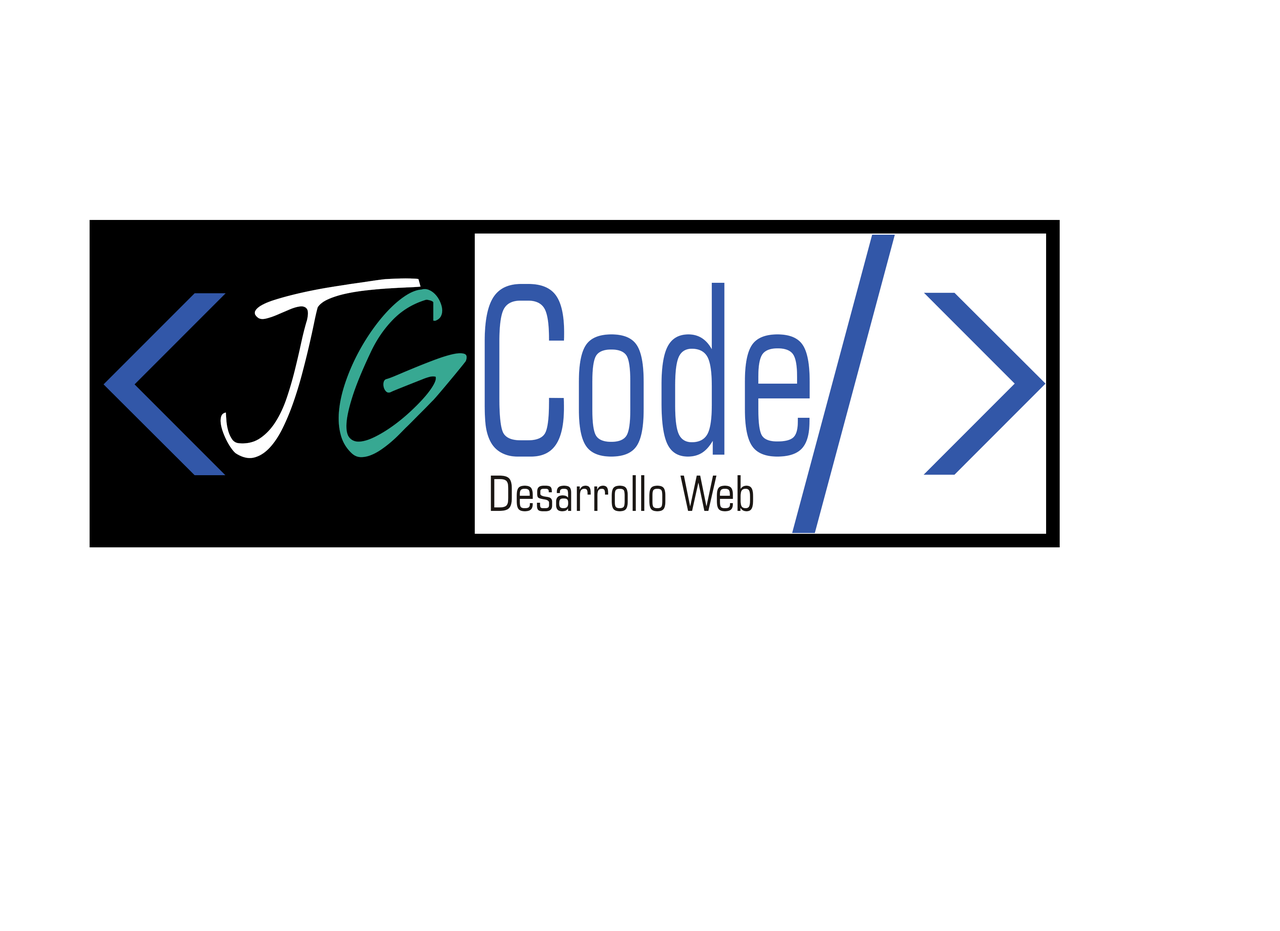
<style>
.page{position:relative;width:1280px;height:931px;background:#ffffff}
.page>*{position:absolute;margin:0}
.t1{font:291px "FashionFetish";color:#3257a8}
.t2{font:232.8px "NothingYouCouldDo";color:#ffffff;scale:0.83 1}
.t3{font:232.8px "NothingYouCouldDo";color:#37a892;scale:0.83 1}
.t4{font:232.8px "Square721BT-RomanCondensed";color:#3257a8;scale:0.83 1}
.t5{font:48.5px "Square721BT-RomanCondensed";color:#1b1714}
</style>
<div class="page">
<p class="t1" style="left:792px;top:235px;width:254px;height:298px">/&gt;</p>
<p class="t2" style="left:220px;top:278px;width:247px;height:180px">J<span class="t3">G</span></p>
<p class="t1" style="left:104px;top:293px;width:122px;height:182px">&lt;</p>
<p class="t4" style="left:485px;top:283px;width:325px;height:174px">Code</p>
<p class="t5" style="left:491px;top:475px;width:263px;height:36px">Desarrollo Web</p>
</div>
